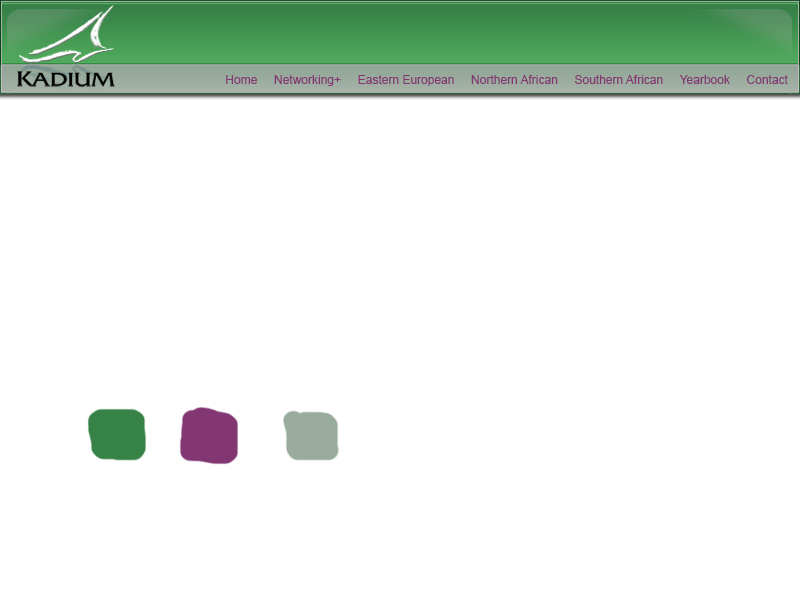
<style>
.page{position:relative;width:800px;height:600px;background:#ffffff}
.page>*{position:absolute;margin:0}
.t1{font:12px "ArialMT";color:#823772}
</style>
<div class="page">
<p class="t1" style="left:226px;top:75px;width:562px;height:11px">Home     Networking+     Eastern European     Northern African     Southern African     Yearbook     Contact</p>
</div>
